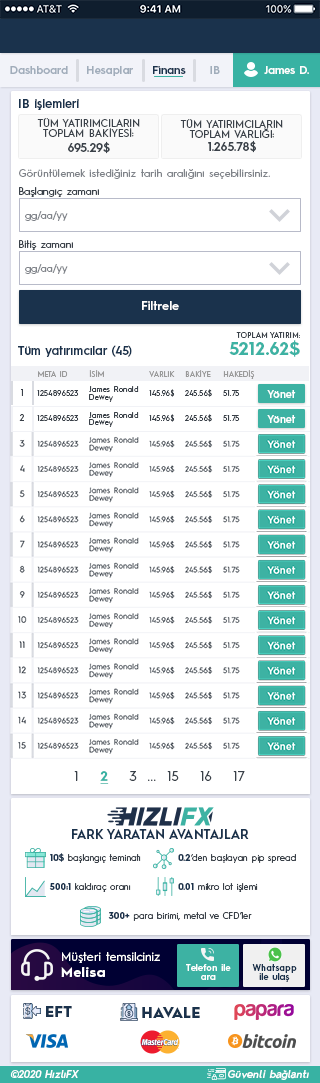
<style>
.page{position:relative;width:320px;height:1083px;background:#ffffff}
.page>*{position:absolute;margin:0}
.t1{font:11.1px "HurmeGeometricSans3-SemiBold";color:#a1adbb}
.t2{font:11.1px "HurmeGeometricSans3-SemiBold";color:#1a324c}
.t3{font:11.1px "HurmeGeometricSans3-SemiBold";color:#fefefe}
.t4{font:11.9px "HurmeGeometricSans3-SemiBold";color:#1a324c}
.t5{font:10.2px "HurmeGeometricSans1-Regular";letter-spacing:0.01em;color:#3a4149}
.t6{font:10.2px/10.2px "HurmeGeometricSans1-Regular";letter-spacing:0.01em;color:#3a4149}
.t7{font:11.9px "HurmeGeometricSans1-SemiBold";letter-spacing:0.01em;color:#3a4149}
.t8{font:11.9px/12.8px "HurmeGeometricSans1-SemiBold";letter-spacing:0.01em;color:#3a4149}
.t9{font:10.2px "HurmeGeometricSans1-Regular";letter-spacing:0.025em;color:#7f8389}
.t10{font:10.2px "HurmeGeometricSans1-Regular";letter-spacing:0.01em;color:#7f8389}
.t11{font:11.9px "HurmeGeometricSans1-SemiBold";letter-spacing:0.025em;color:#ffffff}
.t12{font:17.9px "HurmeGeometricSans1-Bold";letter-spacing:0.01em;color:#3db2a3}
.t13{font:7.7px "HurmeGeometricSans1-Regular";letter-spacing:0.01em;color:#3a4149}
.t14{font:7.7px "HurmeGeometricSans1-Regular";color:#999999}
.t15{font:9px "HurmeGeometricSans1-Regular";letter-spacing:0.025em;color:#3a4149}
.t16{font:7.7px "HurmeGeometricSans1-Regular";letter-spacing:0.025em;color:#3a4149}
.t17{font:7.7px/7.7px "HurmeGeometricSans1-Regular";letter-spacing:0.025em;color:#3a4149}
.t18{font:10.2px "HurmeGeometricSans3-SemiBold";letter-spacing:0.025em;color:#ffffff}
.t19{font:12.8px "HurmeGeometricSans1-Regular";letter-spacing:0.025em;color:#3a4149}
.t20{font:12.8px "HurmeGeometricSans1-Bold";letter-spacing:0.025em;color:#38b2a3;text-decoration:underline}
.t21{font:12.8px "HurmeGeometricSans1-SemiBold";color:#1a324c}
.t22{font:9px "HurmeGeometricSans1-Regular";color:#3a4149}
.t23{font:9px "HurmeGeometricSans1-Bold";color:#1a324c}
.t24{font:11.9px/15.4px "HurmeGeometricSans1-Regular";letter-spacing:0.025em;color:#ffffff}
.t25{font:13.6px/15.4px "HurmeGeometricSans1-Bold";letter-spacing:0.05em;color:#ffffff}
.t26{font:8.9px/8.9px "HurmeGeometricSans3-SemiBold";letter-spacing:0.01em;color:#ffffff}
.t27{font:8.9px/8.9px "HurmeGeometricSans3-SemiBold";letter-spacing:0.01em;color:#1a324c}
.t28{font:14.5px "HurmeGeometricSans1-Black";letter-spacing:0.025em;color:#1a324c}
.t29{font:10.2px "HurmeGeometricSans2-SemiBoldObl";letter-spacing:0.025em;color:#ffffff}
</style>
<div class="page">
<p class="t1" style="left:10px;top:66px;width:58px;height:8px">Dashboard</p>
<p class="t1" style="left:87px;top:66px;width:46px;height:10px">Hesaplar</p>
<p class="t2" style="left:153px;top:66px;width:33px;height:8px">Finans</p>
<p class="t1" style="left:210px;top:66px;width:10px;height:8px">IB</p>
<p class="t3" style="left:264px;top:66px;width:45px;height:8px">James D.</p>
<p class="t4" style="left:19px;top:99px;width:60px;height:11px">IB işlemleri</p>
<p class="t5" style="left:37px;top:118px;width:103px;height:36px;text-align:center">TÜM YATIRIMCILARIN<br><span class="t6">TOPLAM BAKİYESİ:<br></span><span class="t7">695.29$</span></p>
<p class="t5" style="left:180px;top:119px;width:103px;height:34px;text-align:center">TÜM YATIRIMCILARIN<br><span class="t6">TOPLAM VARLIĞI:<br></span><span class="t8">1.265.78$</span></p>
<p class="t9" style="left:19px;top:169px;width:251px;height:10px">Görüntülemek istediğiniz tarih aralığını seçebilirsiniz.</p>
<p class="t5" style="left:19px;top:187px;width:80px;height:10px">Başlangıç zamanı</p>
<p class="t10" style="left:25px;top:211px;width:43px;height:10px">gg/aa/yy</p>
<p class="t5" style="left:19px;top:240px;width:54px;height:10px">Bitiş zamanı</p>
<p class="t10" style="left:25px;top:264px;width:43px;height:10px">gg/aa/yy</p>
<p class="t11" style="left:142px;top:301px;width:37px;height:9px">Filtrele</p>
<p class="t12" style="left:229px;top:340px;width:71px;height:17px">5212.62$</p>
<p class="t13" style="left:236px;top:332px;width:64px;height:6px">TOPLAM YATIRIM:</p>
<p class="t4" style="left:18px;top:345px;width:114px;height:12px">Tüm yatırımcılar (45)</p>
<p class="t14" style="left:38px;top:371px;width:30px;height:6px">META ID</p>
<p class="t14" style="left:89px;top:370px;width:15px;height:7px">İSİM</p>
<p class="t14" style="left:149px;top:371px;width:26px;height:6px">VARLIK</p>
<p class="t14" style="left:185px;top:370px;width:26px;height:7px">BAKİYE</p>
<p class="t14" style="left:223px;top:370px;width:32px;height:9px">HAKEDİŞ</p>
<p class="t15" style="left:21px;top:389px;width:2px;height:7px">1</p>
<p class="t16" style="left:37px;top:390px;width:42px;height:6px">1254896523</p>
<p class="t17" style="left:89px;top:386px;width:50px;height:16px">James Ronald<br>Dewey</p>
<p class="t16" style="left:149px;top:389px;width:26px;height:8px">145.96$</p>
<p class="t16" style="left:185px;top:389px;width:27px;height:8px">245.56$</p>
<p class="t16" style="left:223px;top:390px;width:17px;height:6px">51.75</p>
<p class="t18" style="left:267px;top:390px;width:29px;height:8px">Yönet</p>
<p class="t15" style="left:19px;top:414px;width:5px;height:7px">2</p>
<p class="t17" style="left:89px;top:412px;width:50px;height:15px">James Ronald<br>Dewey</p>
<p class="t16" style="left:149px;top:414px;width:26px;height:8px">145.96$</p>
<p class="t16" style="left:185px;top:414px;width:27px;height:8px">245.56$</p>
<p class="t16" style="left:37px;top:415px;width:42px;height:6px">1254896523</p>
<p class="t16" style="left:223px;top:415px;width:17px;height:6px">51.75</p>
<p class="t18" style="left:267px;top:415px;width:29px;height:8px">Yönet</p>
<p class="t19" style="left:74px;top:771px;width:171px;height:13px">1    <span class="t20">2</span>    3  ...  15    16    17</p>
<p class="t21" style="left:72px;top:829px;width:177px;height:10px">FARK YARATAN AVANTAJLAR</p>
<p class="t22" style="left:50px;top:853px;width:91px;height:10px"><span class="t23">10$</span> başlangıç teminatı</p>
<p class="t22" style="left:178px;top:854px;width:118px;height:9px"><span class="t23">0.2</span>‘den başlayan pip spread</p>
<p class="t22" style="left:49px;top:883px;width:82px;height:9px"><span class="t23">500:1</span> kaldıraç oranı</p>
<p class="t22" style="left:178px;top:883px;width:80px;height:9px"><span class="t23">0.01</span> mikro lot işlemi</p>
<p class="t22" style="left:108px;top:912px;width:144px;height:9px"><span class="t23">300+</span> para birimi, metal ve CFD’ler</p>
<p class="t24" style="left:61px;top:952px;width:99px;height:25px">Müşteri temsilciniz<br><span class="t25">Melisa</span></p>
<p class="t26" style="left:186px;top:964px;width:45px;height:16px;text-align:center">Telefon ile<br>ara</p>
<p class="t27" style="left:252px;top:964px;width:45px;height:18px;text-align:center">Whatsapp<br>ile ulaş</p>
<p class="t28" style="left:46px;top:1006px;width:26px;height:11px">EFT</p>
<p class="t28" style="left:142px;top:1007px;width:58px;height:11px">HAVALE</p>
<p class="t29" style="left:10px;top:1070px;width:69px;height:8px">©2020 HızlıFX</p>
<p class="t29" style="left:228px;top:1070px;width:81px;height:10px">Güvenli bağlantı</p>
</div>
